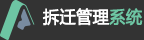
<style>
.page{position:relative;width:144px;height:40px;background:#333333}
.page>*{position:absolute;margin:0}
.t1{font:17px "MicrosoftYaHei";color:#ffffff;font-weight:bold;scale:0.95 1}
.t2{font:17px "MicrosoftYaHei";color:#6dc5a3;font-weight:bold;scale:0.95 1}
</style>
<div class="page">
<p class="t1" style="left:42px;top:8px;width:101px;height:18px">拆迁管理<span class="t2">系统</span></p>
</div>
